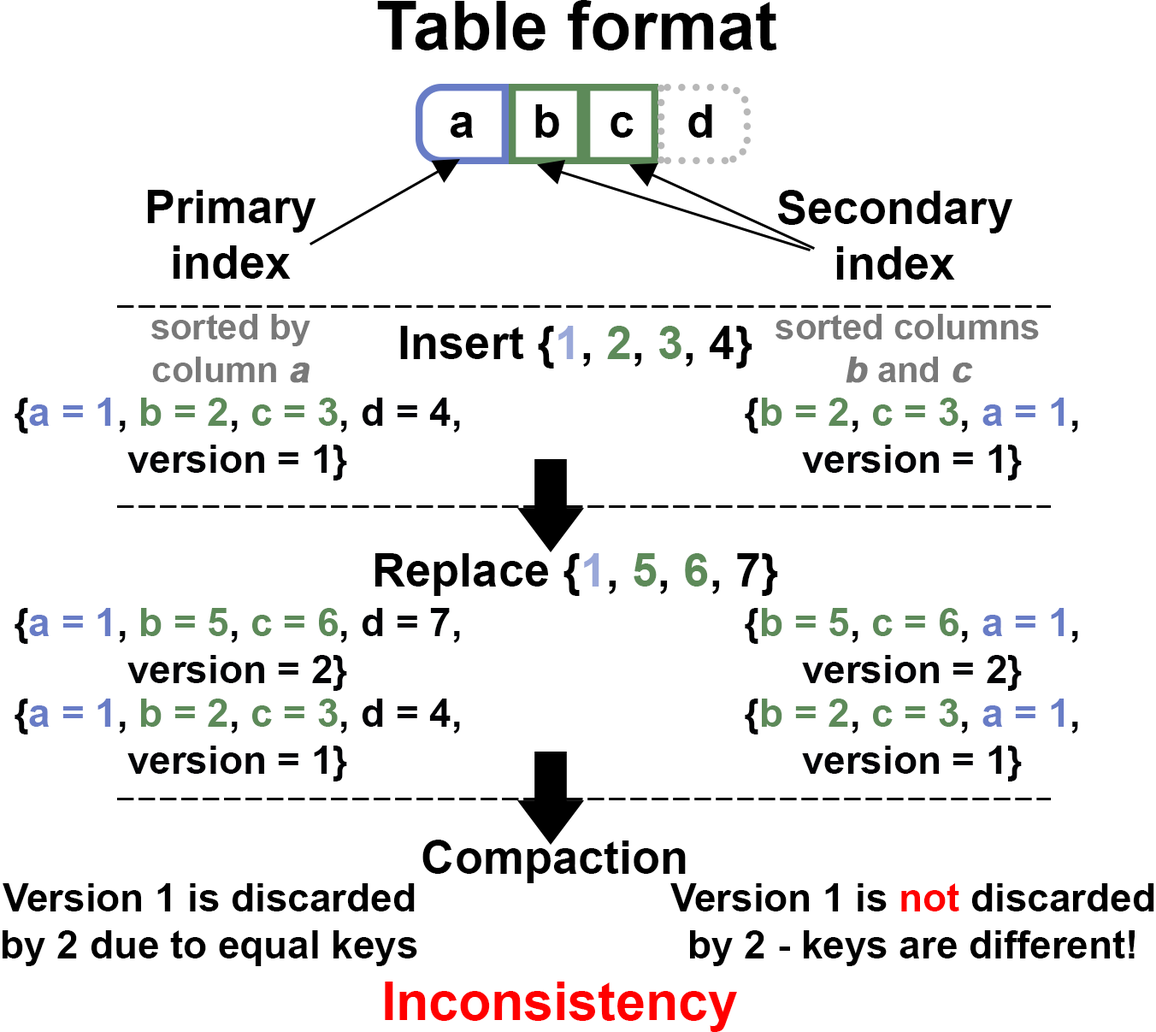
<style>
.page{position:relative;width:1156px;height:1032px;background:#ffffff}
.page>*{position:absolute;margin:0}
.t1{font:67.7px "Arial-BoldMT";color:#000000}
.t2{font:46.3px "Arial-BoldMT";color:#000000}
.t3{font:35.6px "Arial-BoldMT";color:#797979}
.t4{font:35.6px "Arial-BoldMT";color:#797979;font-weight:bold;font-style:italic}
.t5{font:46.3px "Arial-BoldMT";color:#9aa8d9}
.t6{font:46.3px "Arial-BoldMT";color:#5d8a59}
.t7{font:39.2px "Arial-BoldMT";color:#020306}
.t8{font:39.2px "Arial-BoldMT";color:#687cc6}
.t9{font:39.2px "Arial-BoldMT";color:#5d8a59}
.t10{font:39.2px "Arial-BoldMT";color:#000000}
.t11{font:39.2px "Arial-BoldMT";color:#ff0000}
.t12{font:53.4px "Arial-BoldMT";color:#ff0000}
</style>
<div class="page">
<p class="t1" style="left:377px;top:0px;width:400px;height:50px">Table format</p>
<p class="t2" style="left:450px;top:112px;width:24px;height:26px">a</p>
<p class="t2" style="left:535px;top:104px;width:24px;height:34px">b</p>
<p class="t2" style="left:610px;top:112px;width:23px;height:26px">c</p>
<p class="t2" style="left:688px;top:104px;width:24px;height:34px">d</p>
<p class="t2" style="left:147px;top:190px;width:169px;height:89px;text-align:center">Primary<br>index</p>
<p class="t2" style="left:778px;top:190px;width:235px;height:90px;text-align:center">Secondary<br>index</p>
<p class="t3" style="left:151px;top:314px;width:159px;height:69px;text-align:center">sorted by<br>column <span class="t4">a</span></p>
<p class="t3" style="left:775px;top:314px;width:264px;height:69px;text-align:center">sorted columns<br><span class="t4">b</span> and <span class="t4">c</span></p>
<p class="t2" style="left:400px;top:326px;width:352px;height:42px">Insert {<span class="t5">1</span>, <span class="t6">2</span>, <span class="t6">3</span>, 4}</p>
<p class="t7" style="left:15px;top:397px;width:445px;height:83px;text-align:center">{<span class="t8">a = 1</span>, <span class="t9">b = 2</span>, <span class="t9">c = 3</span>, d = 4,<br>version = 1}</p>
<p class="t7" style="left:745px;top:397px;width:333px;height:83px;text-align:center">{<span class="t9">b = 2</span>, <span class="t9">c = 3</span>, <span class="t8">a = 1</span>,<br>version = 1}</p>
<p class="t2" style="left:374px;top:553px;width:404px;height:43px">Replace {<span class="t5">1</span>, <span class="t6">5</span>, <span class="t6">6</span>, 7}</p>
<p class="t7" style="left:15px;top:608px;width:445px;height:83px;text-align:center">{<span class="t8">a = 1</span>, <span class="t9">b = 5</span>, <span class="t9">c = 6</span>, d = 7,<br>version = 2}</p>
<p class="t7" style="left:745px;top:608px;width:333px;height:83px;text-align:center">{<span class="t9">b = 5</span>, <span class="t9">c = 6</span>, <span class="t8">a = 1</span>,<br>version = 2}</p>
<p class="t7" style="left:15px;top:698px;width:445px;height:83px;text-align:center">{<span class="t8">a = 1</span>, <span class="t9">b = 2</span>, <span class="t9">c = 3</span>, d = 4,<br>version = 1}</p>
<p class="t7" style="left:745px;top:698px;width:333px;height:83px;text-align:center">{<span class="t9">b = 2</span>, <span class="t9">c = 3</span>, <span class="t8">a = 1</span>,<br>version = 1}</p>
<p class="t2" style="left:422px;top:839px;width:264px;height:44px">Compaction</p>
<p class="t10" style="left:3px;top:883px;width:414px;height:83px;text-align:center">Version 1 is discarded<br>by 2 due to equal keys</p>
<p class="t10" style="left:670px;top:883px;width:484px;height:83px;text-align:center">Version 1 is <span class="t11">not</span> discarded<br>by 2 - keys are different!</p>
<p class="t12" style="left:385px;top:981px;width:352px;height:51px">Inconsistency</p>
</div>
